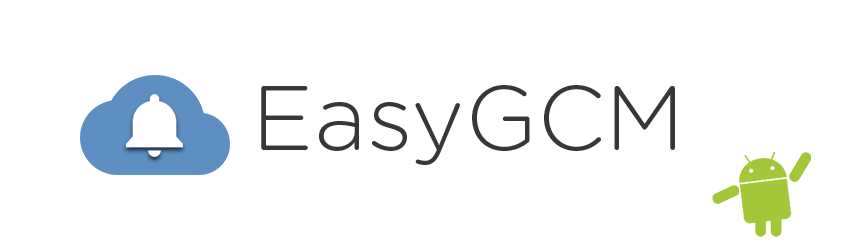
<style>
.page{position:relative;width:850px;height:250px;background:#ffffff}
.page>*{position:absolute;margin:0}
.t1{font:91.9px "GothamRounded-Light";color:#373737}
</style>
<div class="page">
<p class="t1" style="left:261px;top:85px;width:414px;height:80px">EasyGCM</p>
</div>
